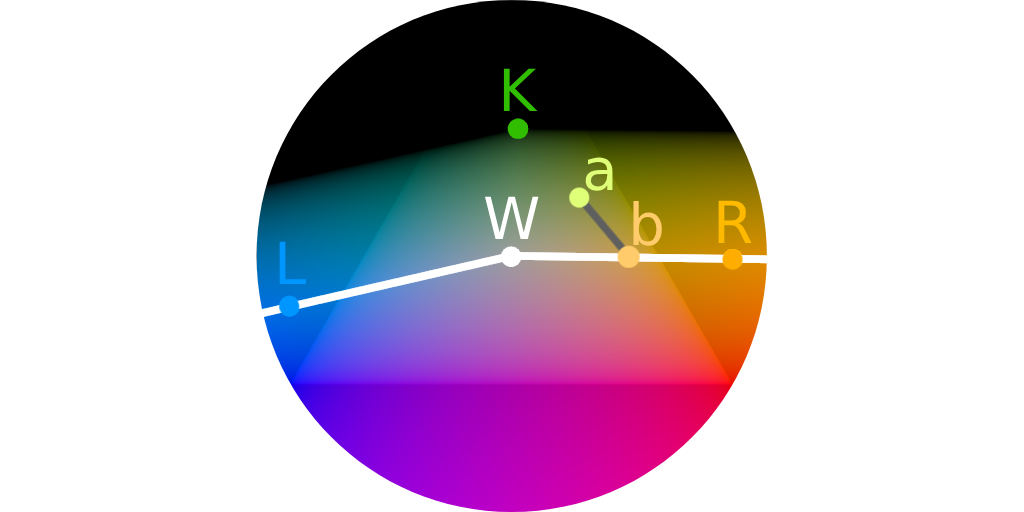
<style>
.page{position:relative;width:1024px;height:512px;background:#ffffff}
.page>*{position:absolute;margin:0}
.t1{font:57.9px "DejaVuSans";color:#31be00}
.t2{font:57.9px "DejaVuSans";color:#dfff78}
.t3{font:57.9px "DejaVuSans";color:#ffffff}
.t4{font:57.9px "DejaVuSans";color:#ffcb6b}
.t5{font:57.9px "DejaVuSans";color:#ffba00}
.t6{font:57.9px "DejaVuSans";color:#0096ff}
</style>
<div class="page">
<p class="t1" style="left:503px;top:68px;width:35px;height:43px">K</p>
<p class="t2" style="left:585px;top:157px;width:28px;height:34px">a</p>
<p class="t3" style="left:485px;top:196px;width:54px;height:43px">W</p>
<p class="t4" style="left:633px;top:201px;width:29px;height:45px">b</p>
<p class="t5" style="left:718px;top:200px;width:34px;height:43px">R</p>
<p class="t6" style="left:279px;top:241px;width:27px;height:43px">L</p>
</div>
